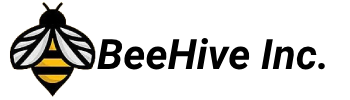
<style>
.page{position:relative;width:350px;height:100px;background:#ffffff}
.page>*{position:absolute;margin:0}
.t1{font:42px "Roboto-BoldItalic";color:#000000}
</style>
<div class="page">
<p class="t1" style="left:97px;top:37px;width:228px;height:33px">BeeHive Inc.</p>
</div>
